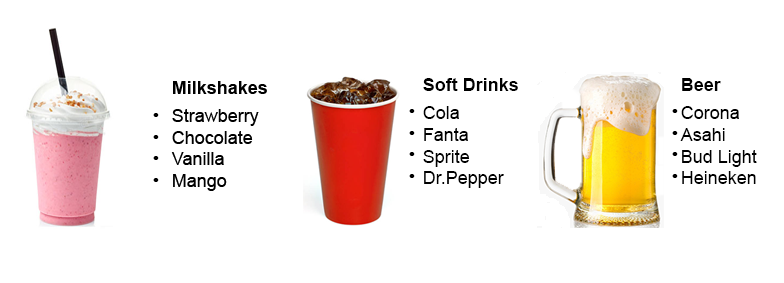
<style>
.page{position:relative;width:784px;height:283px;background:#ffffff}
.page>*{position:absolute;margin:0}
.t1{font:18px "Arial-BoldMT";color:#000000}
.t2{font:18px "ArialMT";color:#000000}
</style>
<div class="page">
<p class="t1" style="left:423px;top:78px;width:95px;height:13px">Soft Drinks</p>
<p class="t1" style="left:682px;top:78px;width:39px;height:13px">Beer</p>
<p class="t2" style="left:423px;top:106px;width:81px;height:82px;text-align:right">Cola<br>Fanta<br>Sprite<br>Dr.Pepper</p>
<p class="t2" style="left:680px;top:106px;width:77px;height:78px;text-align:right">Corona<br>Asahi<br>Bud Light<br>Heineken</p>
</div>
